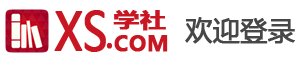
<style>
.page{position:relative;width:298px;height:60px;background:#ffffff}
.page>*{position:absolute;margin:0}
.t1{font:51.2px "MicrosoftYaHei";color:#c91623;font-weight:bold;scale:0.83 1}
.t2{font:20px "MicrosoftYaHei-Bold";color:#c91623;font-weight:bold;scale:1.28 1}
.t3{font:26.7px "MicrosoftYaHei";color:#474747;font-weight:bold}
.t4{font:21.3px "MicrosoftYaHei-Bold";color:#c91623;font-weight:bold}
.t5{font:37.3px "MicrosoftYaHei";color:#c91623;font-weight:bold;scale:0.89 1}
</style>
<div class="page">
<p class="t1" style="left:54px;top:10px;width:52px;height:42px">XS</p>
<p class="t2" style="left:113px;top:10px;width:53px;height:21px">学社</p>
<p class="t3" style="left:185px;top:17px;width:110px;height:27px">欢迎登录</p>
<p class="t4" style="left:114px;top:35px;width:54px;height:17px">COM</p>
<p class="t5" style="left:106px;top:43px;width:6px;height:6px">.</p>
</div>
